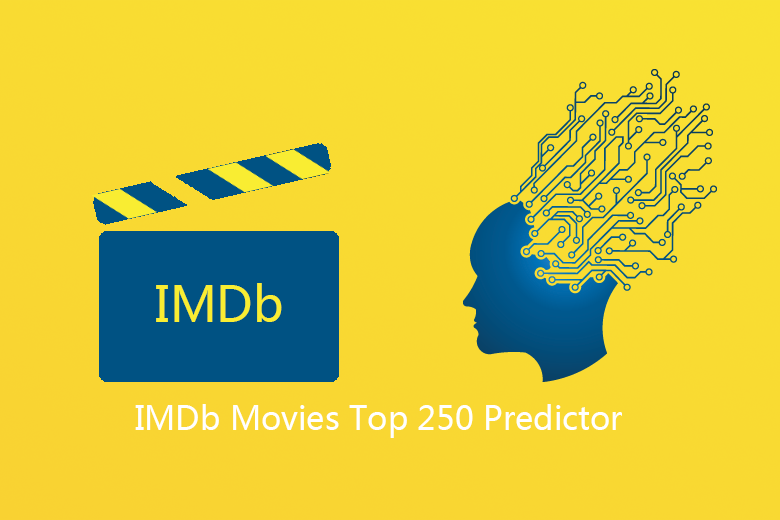
<style>
.page{position:relative;width:780px;height:520px}
.page>*{position:absolute;margin:0}
.t1{font:48px "MicrosoftYaHei";color:#f9ed32}
.t2{font:32px "MicrosoftYaHei";color:#ffffff}
</style>
<div class="page">
<p class="t1" style="left:156px;top:283px;width:126px;height:39px">IMDb</p>
<p class="t2" style="left:135px;top:404px;width:487px;height:34px">IMDb Movies Top 250 Predictor</p>
</div>
